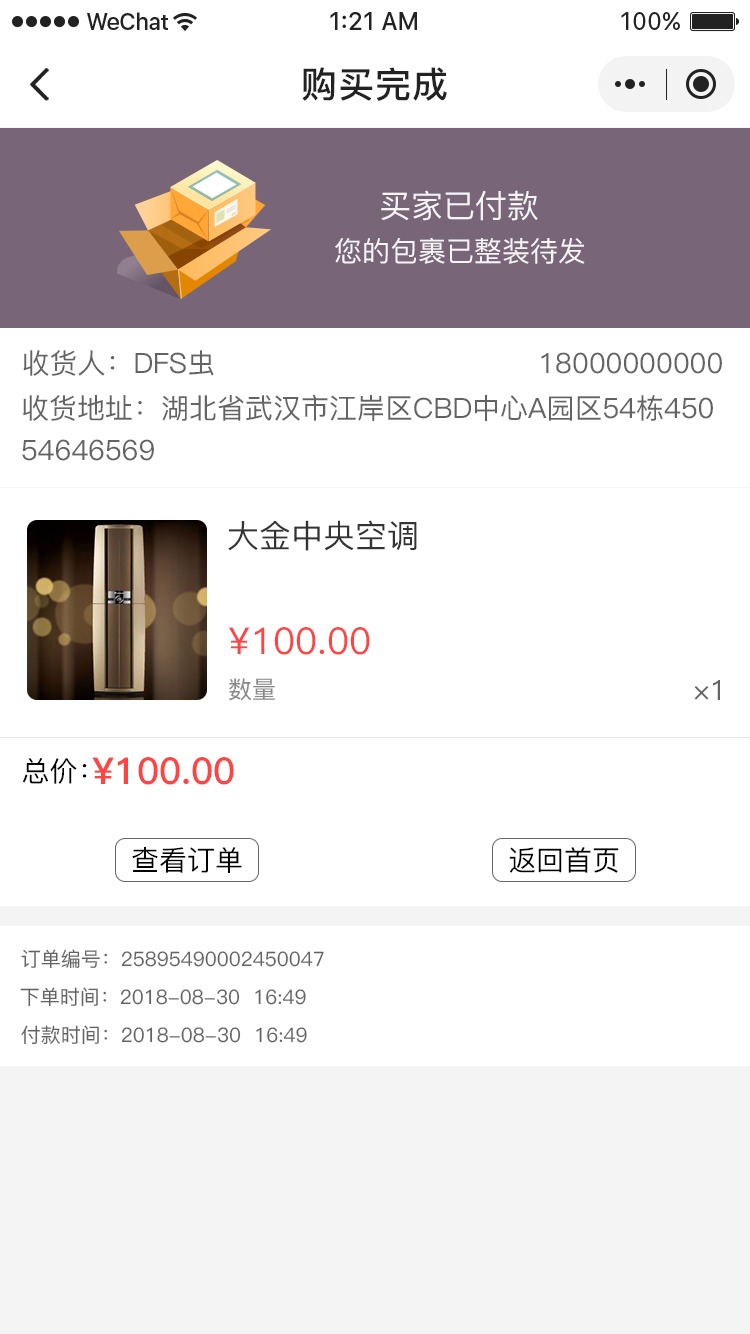
<style>
.page{position:relative;width:750px;height:1334px;background:#ffffff}
.page>*{position:absolute;margin:0}
.t1{font:36px "PingFang-SC-Bold";letter-spacing:0.028em;color:#222222}
.t2{font:32px "PingFang-SC-Medium";color:#f5f5f5;text-transform:uppercase}
.t3{font:28px "PingFang-SC-Medium";color:#f5f5f5;text-transform:uppercase}
.t4{font:28px "PingFang-SC-Medium";color:#636363;text-transform:uppercase}
.t5{font:28px/42px "PingFang-SC-Medium";color:#636363;text-transform:uppercase}
.t6{font:32px "PingFang-SC-Medium";color:#333333;text-transform:uppercase}
.t7{font:37px "PingFang-SC-Medium";color:#ff4444;text-transform:uppercase}
.t8{font:24px "PingFang-SC-Medium";color:#888888;text-transform:uppercase}
.t9{font:28px "PingFang-SC-Medium";color:#000000}
.t10{font:37px "PingFang-SC-Bold";color:#ff4444}
.t11{font:28px "PingFang-SC-Medium";color:#010101}
.t12{font:20px "PingFang-SC-Medium";color:#636363;text-transform:uppercase}
</style>
<div class="page">
<p class="t1" style="left:302px;top:67px;width:145px;height:34px">购买完成</p>
<p class="t2" style="left:381px;top:190px;width:157px;height:31px">买家已付款</p>
<p class="t3" style="left:335px;top:237px;width:250px;height:27px">您的包裹已整装待发</p>
<p class="t4" style="left:23px;top:350px;width:191px;height:26px">收货人：dfs虫</p>
<p class="t4" style="left:541px;top:352px;width:181px;height:22px">18000000000</p>
<p class="t5" style="left:22px;top:394px;width:691px;height:67px">收货地址：湖北省武汉市江岸区CBD中心A园区54栋450<br>54646569</p>
<p class="t6" style="left:228px;top:520px;width:189px;height:31px">大金中央空调</p>
<p class="t7" style="left:229px;top:627px;width:141px;height:28px">¥100.00</p>
<p class="t8" style="left:229px;top:678px;width:46px;height:23px">数量</p>
<p class="t4" style="left:694px;top:680px;width:26px;height:20px">×1</p>
<p class="t9" style="left:22px;top:758px;width:65px;height:26px">总价：</p>
<p class="t10" style="left:92px;top:757px;width:142px;height:28px">¥100.00</p>
<p class="t11" style="left:132px;top:847px;width:110px;height:26px">查看订单</p>
<p class="t11" style="left:509px;top:847px;width:110px;height:26px">返回首页</p>
<p class="t12" style="left:21px;top:949px;width:303px;height:20px">订单编号：25895490002450047</p>
<p class="t12" style="left:20px;top:987px;width:286px;height:20px">下单时间：2018-08-30  16:49</p>
<p class="t12" style="left:21px;top:1025px;width:286px;height:20px">付款时间：2018-08-30  16:49</p>
</div>
